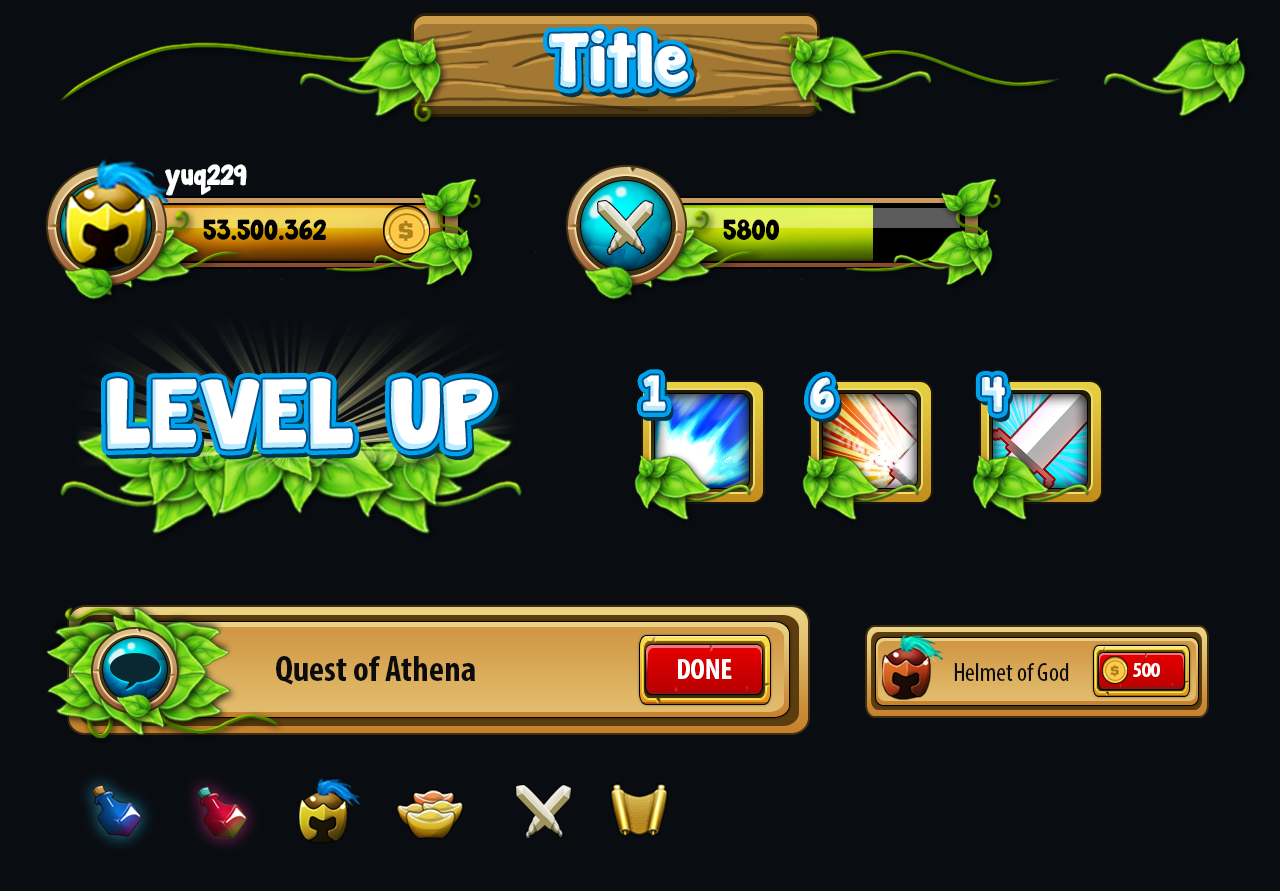
<style>
.page{position:relative;width:1280px;height:891px;background:#090d12}
.page>*{position:absolute;margin:0}
.t1{font:67.7px "JandaManateeSolid";color:#ffffff}
.t2{font:25.9px "JandaManateeSolid";color:#ffffff}
.t3{font:25.9px "JandaManateeSolid";color:#000000}
.t4{font:44.1px "JandaManateeSolid";text-transform:uppercase;scale:1.05 1}
.t5{font:44.1px "JandaManateeSolid";color:#ffffff;text-transform:uppercase;scale:1.05 1}
.t6{font:87.5px "JandaManateeSolid";color:#ffffff;text-transform:uppercase}
.t7{font:36px "MyriadPro-BoldCond";color:#0c0c0c}
.t8{font:29.4px "MyriadPro-BoldCond";color:#ffffff;text-transform:uppercase}
.t9{font:26.5px "MyriadPro-Cond";color:#0c0c0c}
.t10{font:21.6px "MyriadPro-BoldCond";color:#ffffff;text-transform:uppercase}
</style>
<div class="page">
<p class="t1" style="left:549px;top:30px;width:139px;height:58px">Title</p>
<p class="t2" style="left:165px;top:164px;width:82px;height:32px">yuq229</p>
<p class="t3" style="left:203px;top:219px;width:123px;height:21px">53.500.362</p>
<p class="t3" style="left:723px;top:219px;width:56px;height:21px">5800</p>
<p class="t4" style="left:643px;top:375px;width:23px;height:36px">1</p>
<p class="t5" style="left:810px;top:377px;width:24px;height:36px">6</p>
<p class="t4" style="left:982px;top:376px;width:23px;height:36px">4</p>
<p class="t6" style="left:107px;top:378px;width:385px;height:72px">level up</p>
<p class="t7" style="left:276px;top:656px;width:199px;height:29px">Quest of Athena</p>
<p class="t8" style="left:678px;top:659px;width:54px;height:20px">Done</p>
<p class="t9" style="left:954px;top:663px;width:115px;height:18px">Helmet of God</p>
<p class="t10" style="left:1133px;top:663px;width:27px;height:14px">500</p>
</div>
